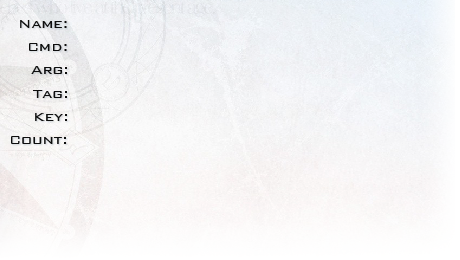
<style>
.page{position:relative;width:460px;height:260px}
.page>*{position:absolute;margin:0}
.t1{font:16px "BankGothicBT-Light";color:#0e0e0e}
</style>
<div class="page">
<p class="t1" style="left:20px;top:20px;width:47px;height:8px">Name:</p>
<p class="t1" style="left:29px;top:43px;width:38px;height:8px">Cmd:</p>
<p class="t1" style="left:31px;top:66px;width:36px;height:8px">Arg:</p>
<p class="t1" style="left:33px;top:90px;width:34px;height:8px">Tag:</p>
<p class="t1" style="left:35px;top:113px;width:32px;height:8px">Key:</p>
<p class="t1" style="left:11px;top:136px;width:55px;height:8px">Count:</p>
</div>
